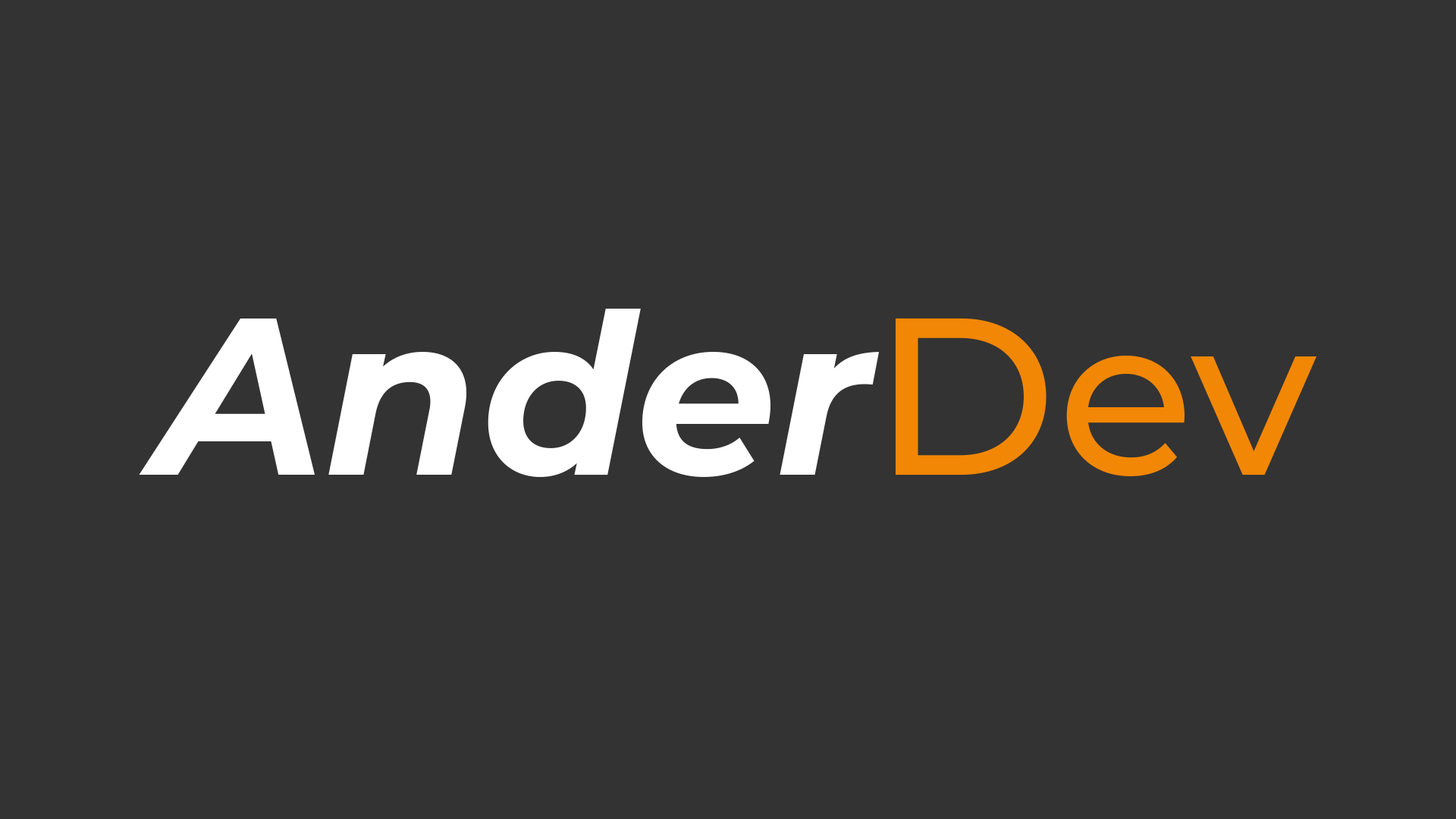
<style>
.page{position:relative;width:1456px;height:819px;background:#333333}
.page>*{position:absolute;margin:0}
.t1{font:223.6px "Montserrat-BoldItalic";color:#ffffff}
.t2{font:223.6px "Montserrat-Medium";color:#f28705}
</style>
<div class="page">
<p class="t1" style="left:139px;top:309px;width:1177px;height:168px">Ander<span class="t2">Dev</span></p>
</div>
